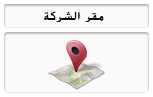
<style>
.page{position:relative;width:153px;height:97px;background:#fafafa}
.page>*{position:absolute;margin:0}
.t1{font:13px "BoutrosAdsMedium";color:#0c0b0b}
</style>
<div class="page">
<p class="t1" style="left:43px;top:11px;width:61px;height:11px">مقر الشركة</p>
</div>
